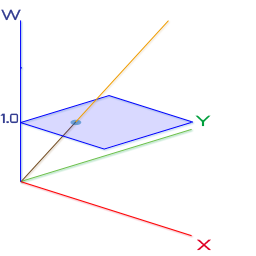
<style>
.page{position:relative;width:256px;height:256px;background:#ffffff}
.page>*{position:absolute;margin:0}
.t1{font:14.4px "PirulenRg-Regular";color:#343d91}
.t2{font:13.2px "PirulenRg-Regular";color:#343d91}
.t3{font:13.2px "PirulenRg-Regular";color:#343d91;scale:0.78 1}
.t4{font:14.4px "PirulenRg-Regular";color:#009f3c}
.t5{font:14.4px "PirulenRg-Regular";color:#df0024}
</style>
<div class="page">
<p class="t1" style="left:1px;top:9px;width:20px;height:12px">W</p>
<p class="t2" style="left:0px;top:113px;width:19px;height:11px">1.<span class="t3">0</span></p>
<p class="t4" style="left:195px;top:115px;width:16px;height:12px">Y</p>
<p class="t5" style="left:197px;top:239px;width:14px;height:12px">X</p>
</div>
